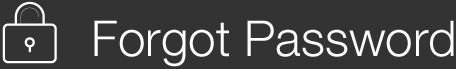
<style>
.page{position:relative;width:456px;height:69px;background:#333333}
.page>*{position:absolute;margin:0}
.t1{font:49.5px "HelveticaNeueLTCom-Lt";color:#ffffff}
</style>
<div class="page">
<p class="t1" style="left:94px;top:20px;width:360px;height:47px">Forgot Password</p>
</div>
